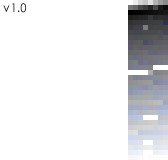
<style>
.page{position:relative;width:168px;height:160px;background:#ffffff}
.page>*{position:absolute;margin:0}
.t1{font:12px "CenturyGothic";letter-spacing:0.025em;color:#000000;scale:0.92 1}
</style>
<div class="page">
<p class="t1" style="left:3px;top:3px;width:23px;height:10px">v 1.0</p>
</div>
